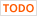
<style>
.page{position:relative;width:37px;height:16px;background:#ffffff}
.page>*{position:absolute;margin:0}
.t1{font:11px "Frutiger-Bold";color:#ff5a00}
</style>
<div class="page">
<p class="t1" style="left:3px;top:4px;width:31px;height:9px">TODO</p>
</div>
